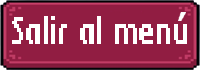
<style>
.page{position:relative;width:200px;height:70px;background:#911d42}
.page>*{position:absolute;margin:0}
.t1{font:36.1px "BerkeliumBitmap";color:#ffffff;scale:0.55 1}
</style>
<div class="page">
<p class="t1" style="left:12px;top:16px;width:175px;height:28px">Salir al menu</p>
</div>
